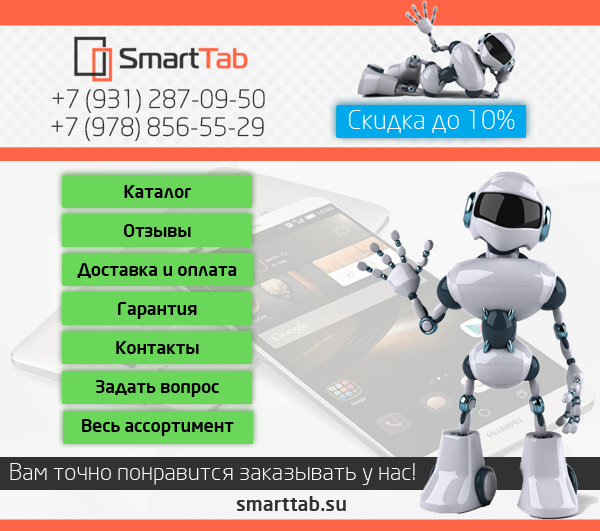
<style>
.page{position:relative;width:600px;height:531px}
.page>*{position:absolute;margin:0}
.t1{font:25px "NeoSansCyr-LIght";color:#323232}
.t2{font:26px "NeoSansCyr-LIght";color:#ffffff}
.t3{font:17.6px/39px "NeoSansCyr-Medium";color:#000000}
.t4{font:23.1px "NeoSansCyr-LIght";color:#ffffff}
.t5{font:20.1px "NeoSansCyr-Medium";color:#323232}
</style>
<div class="page">
<p class="t1" style="left:52px;top:89px;width:213px;height:24px">+7 (931) 287-09-50</p>
<p class="t2" style="left:348px;top:110px;width:167px;height:23px">Скидка до 10%</p>
<p class="t1" style="left:51px;top:117px;width:213px;height:24px">+7 (978) 856-55-29</p>
<p class="t3" style="left:77px;top:185px;width:160px;height:251px;text-align:center">Каталог  <br>Отзывы  <br>Доставка и оплата  <br>Гарантия  <br>Контакты <br>Задать вопрос  <br>Весь ассортимент</p>
<p class="t4" style="left:10px;top:463px;width:405px;height:22px">Вам точно понравится заказывать у нас!</p>
<p class="t5" style="left:236px;top:496px;width:110px;height:15px">smarttab.su</p>
</div>
